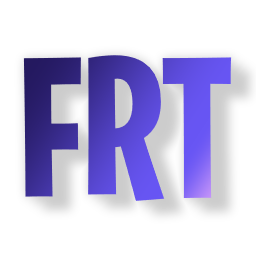
<style>
.page{position:relative;width:256px;height:256px;background:#ffffff}
.page>*{position:absolute;margin:0}
.t1{font:200px "BurbankBigCondensed-Bold"}
</style>
<div class="page">
<p class="t1" style="left:23px;top:55px;width:209px;height:146px">FRT</p>
</div>
